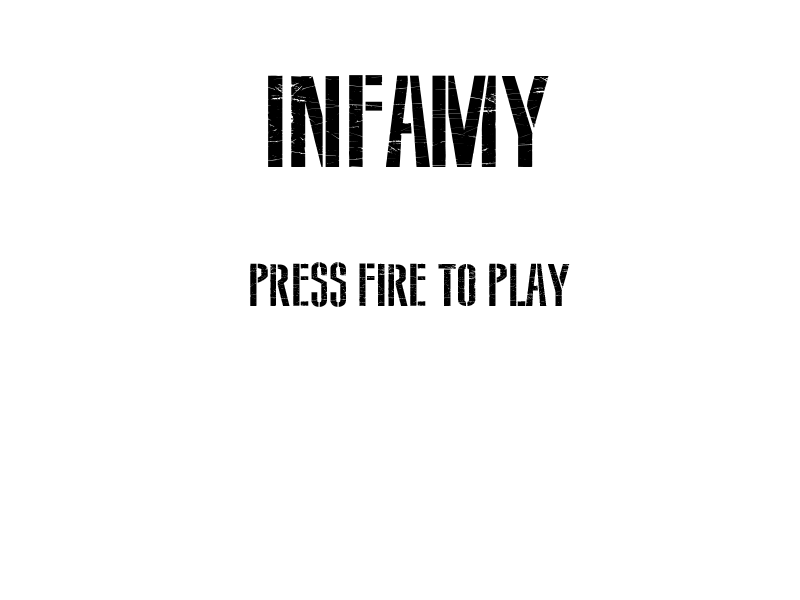
<style>
.page{position:relative;width:800px;height:600px;background:#ffffff}
.page>*{position:absolute;margin:0}
.t1{font:130px "SovietStyle";color:#000000}
.t2{font:60px "SovietStyle";color:#000000}
</style>
<div class="page">
<p class="t1" style="left:267px;top:75px;width:282px;height:92px">Infamy</p>
<p class="t2" style="left:250px;top:262px;width:320px;height:45px">Press fire to play</p>
</div>
